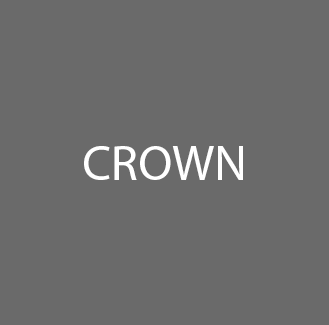
<style>
.page{position:relative;width:329px;height:325px;background:#6a6a6a}
.page>*{position:absolute;margin:0}
.t1{font:50px "MyriadPro-Regular";color:#ffffff}
</style>
<div class="page">
<p class="t1" style="left:84px;top:146px;width:159px;height:34px">CROWN</p>
</div>
